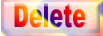
<style>
.page{position:relative;width:103px;height:36px}
.page>*{position:absolute;margin:0}
.t1{font:33.1px "Arial-Black";scale:0.62 1}
</style>
<div class="page">
<p class="t1" style="left:14px;top:3px;width:72px;height:25px">Delete</p>
</div>
